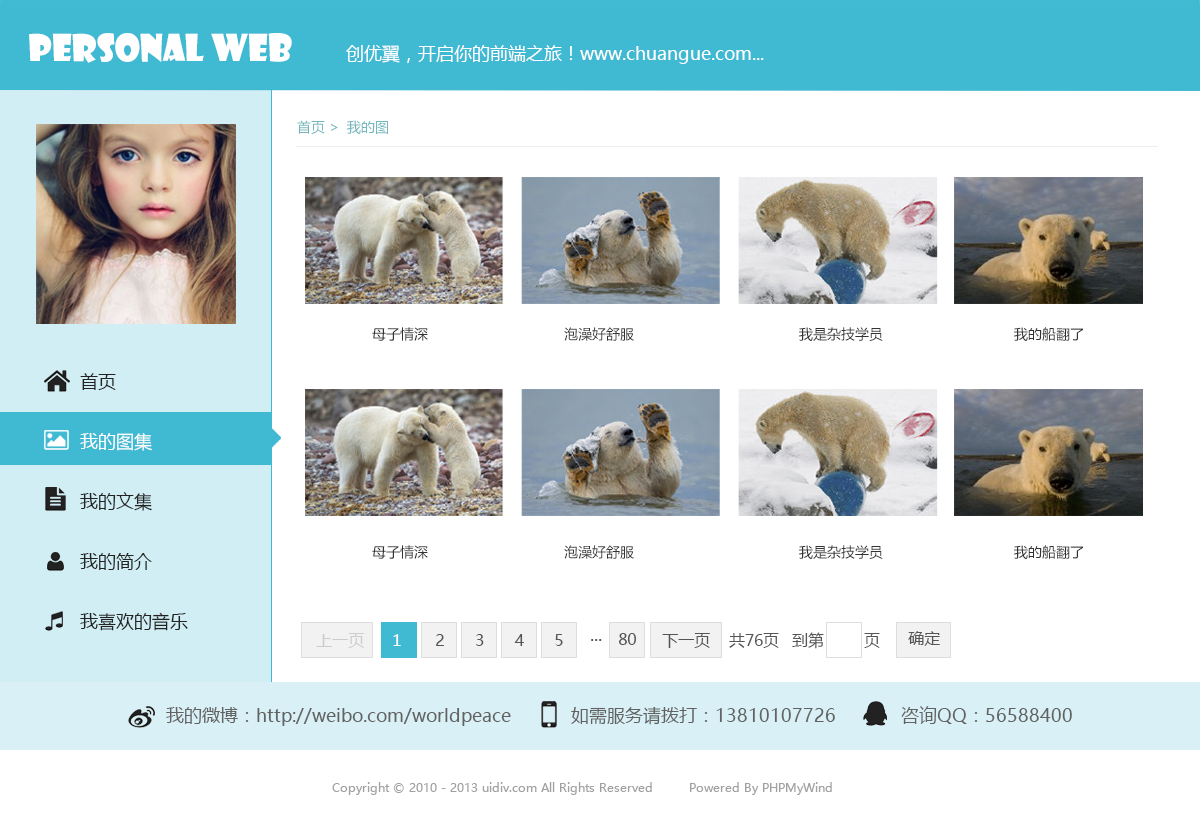
<style>
.page{position:relative;width:1200px;height:818px;background:#ffffff}
.page>*{position:absolute;margin:0}
.t1{font:36px "ShowcardGothic";color:#ffffff}
.t2{font:18px "MicrosoftYaHei";color:#ffffff}
.t3{font:14px "MicrosoftYaHei";color:#72b7bc}
.t4{font:14px "MicrosoftYaHei";color:#333333}
.t5{font:18px/30px "MicrosoftYaHei";color:#222222}
.t6{font:18px/30px "MicrosoftYaHei";color:#ffffff}
.t7{font:16px "MicrosoftYaHei";color:#cccccc}
.t8{font:16px "MicrosoftYaHei";color:#ffffff}
.t9{font:16px "MicrosoftYaHei";letter-spacing:1.92em;color:#555555}
.t10{font:18px "MicrosoftYaHei";color:#555555}
.t11{font:16px "MicrosoftYaHei";color:#555555}
.t12{font:18px "MicrosoftYaHei";color:#616161}
.t13{font:12px "MicrosoftYaHei";color:#a2a2a2}
</style>
<div class="page">
<p class="t1" style="left:29px;top:33px;width:263px;height:30px">personal web</p>
<p class="t2" style="left:346px;top:45px;width:418px;height:19px">创优翼，开启你的前端之旅！www.chuangue.com...</p>
<p class="t3" style="left:297px;top:120px;width:91px;height:14px">首页 &gt;  我的图</p>
<p class="t4" style="left:372px;top:327px;width:56px;height:14px">母子情深</p>
<p class="t4" style="left:564px;top:327px;width:70px;height:14px">泡澡好舒服</p>
<p class="t4" style="left:799px;top:327px;width:84px;height:14px">我是杂技学员</p>
<p class="t4" style="left:1014px;top:327px;width:69px;height:14px">我的船翻了</p>
<p class="t5" style="left:80px;top:373px;width:108px;height:258px">首页<br><br><span class="t6">我的图集<br></span><br>我的文集<br><br>我的简介<br><br>我喜欢的音乐</p>
<p class="t4" style="left:372px;top:545px;width:56px;height:14px">母子情深</p>
<p class="t4" style="left:564px;top:545px;width:70px;height:14px">泡澡好舒服</p>
<p class="t4" style="left:799px;top:545px;width:84px;height:14px">我是杂技学员</p>
<p class="t4" style="left:1014px;top:545px;width:69px;height:14px">我的船翻了</p>
<p class="t7" style="left:316px;top:633px;width:48px;height:15px">上一页</p>
<p class="t8" style="left:393px;top:634px;width:8px;height:12px">1</p>
<p class="t9" style="left:436px;top:634px;width:127px;height:12px">2345</p>
<p class="t10" style="left:591px;top:639px;width:11px;height:2px">...</p>
<p class="t11" style="left:619px;top:633px;width:17px;height:12px">80</p>
<p class="t11" style="left:662px;top:633px;width:48px;height:15px">下一页</p>
<p class="t11" style="left:729px;top:633px;width:50px;height:15px">共76页</p>
<p class="t11" style="left:792px;top:632px;width:88px;height:17px">到第        页</p>
<p class="t11" style="left:908px;top:631px;width:32px;height:15px">确定</p>
<p class="t12" style="left:166px;top:706px;width:906px;height:20px">我的微博：http://weibo.com/worldpeace            如需服务请拨打：13810107726             咨询QQ：56588400</p>
<p class="t13" style="left:332px;top:782px;width:500px;height:13px">Copyright © 2010 - 2013 uidiv.com All Rights Reserved         Powered By PHPMyWind</p>
</div>
